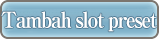
<style>
.page{position:relative;width:159px;height:39px}
.page>*{position:absolute;margin:0}
.t1{font:22px "RyuminPro-ExBold";letter-spacing:-0.08em;color:#ffffff;scale:0.9 1}
</style>
<div class="page">
<p class="t1" style="left:1px;top:11px;width:156px;height:21px">Tambah slot preset</p>
</div>
